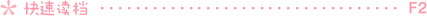
<style>
.page{position:relative;width:427px;height:16px;background:#ffffff}
.page>*{position:absolute;margin:0}
.t1{font:18px "¢è?";color:#ff93a5}
</style>
<div class="page">
<p class="t1" style="left:24px;top:0px;width:64px;height:16px">快速读档</p>
</div>
